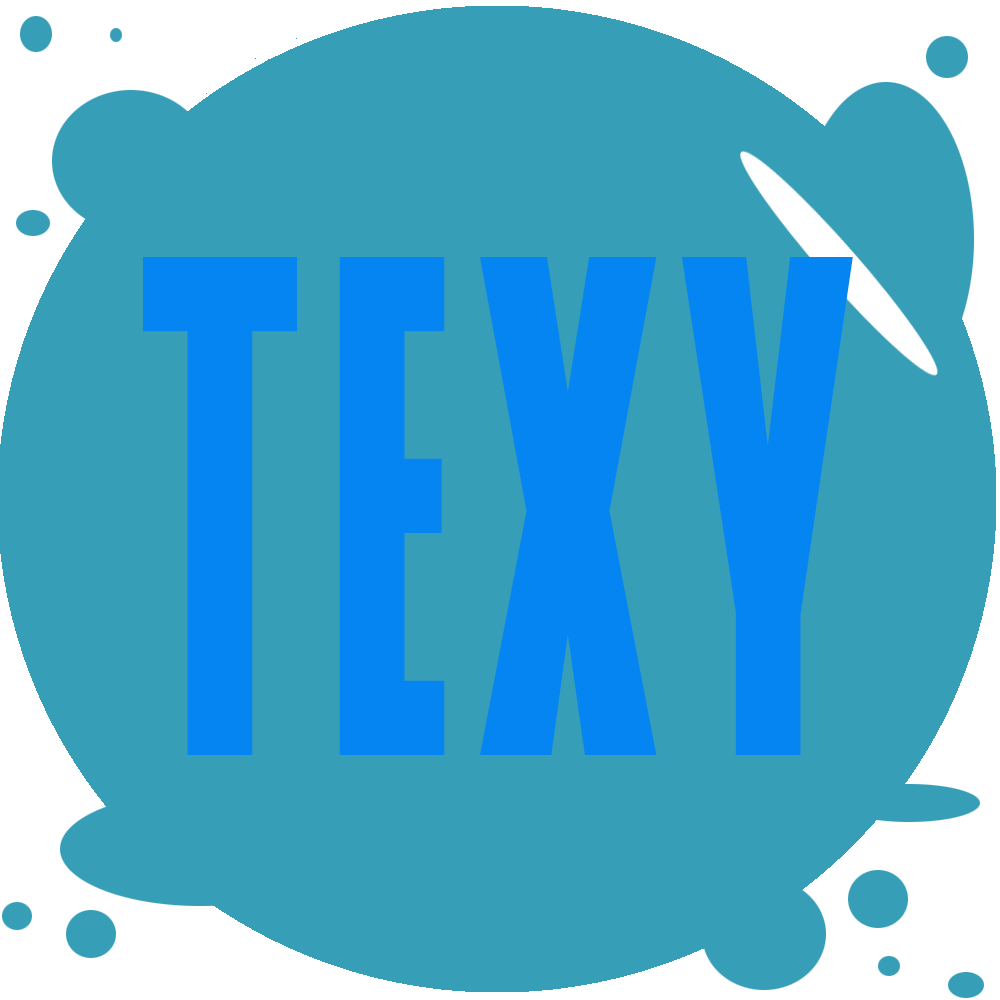
<style>
.page{position:relative;width:1000px;height:1000px;background:#379eb8}
.page>*{position:absolute;margin:0}
.t1{font:639.1px "CodaCaption-ExtraBold";color:#0485f2;scale:0.42 1}
</style>
<div class="page">
<p class="t1" style="left:143px;top:257px;width:710px;height:498px">TEXY</p>
</div>
